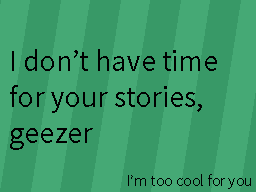
<style>
.page{position:relative;width:256px;height:192px;background:#45a975}
.page>*{position:absolute;margin:0}
.t1{font:30px "SourceSansPro-Regular";color:#000000}
.t2{font:16px "SourceSansPro-Regular";color:#000000}
</style>
<div class="page">
<p class="t1" style="left:10px;top:49px;width:207px;height:101px">I don’t have time<br>for your stories,<br>geezer</p>
<p class="t2" style="left:128px;top:174px;width:123px;height:15px">I’m too cool for you</p>
</div>
